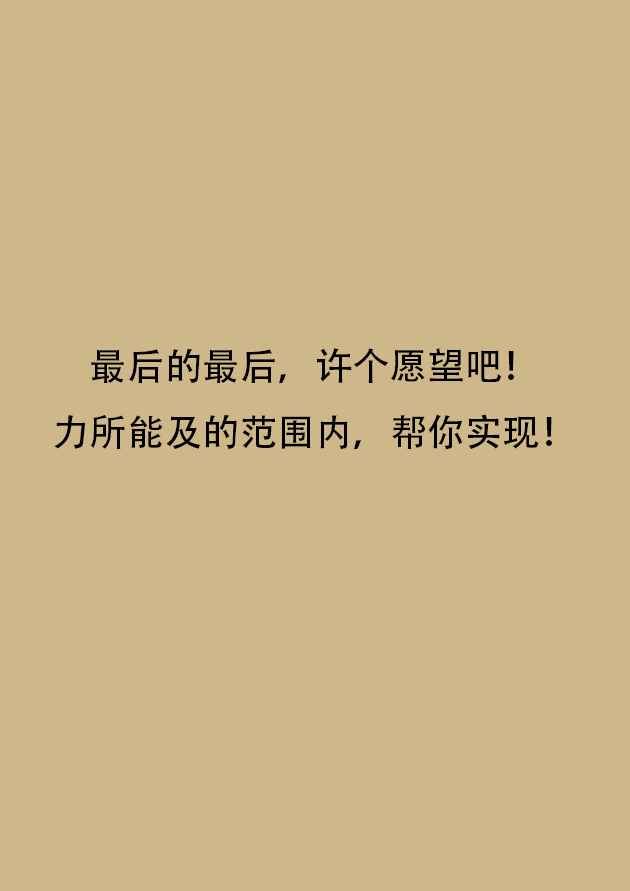
<style>
.page{position:relative;width:630px;height:891px;background:#ceb889}
.page>*{position:absolute;margin:0}
.t1{font:37.5px "AdobeHeitiStd-Regular";color:#000000}
</style>
<div class="page">
<p class="t1" style="left:54px;top:348px;width:498px;height:102px;text-align:center">最后的最后，许个愿望吧！<br>力所能及的范围内，帮你实现！</p>
</div>
